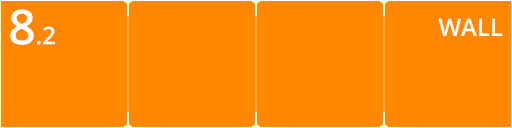
<style>
.page{position:relative;width:512px;height:128px;background:#ff8800}
.page>*{position:absolute;margin:0}
.t1{font:24px "OpenSans-Semibold";color:#ffffff}
.t2{font:48px "OpenSans-Semibold";color:#ffffff}
</style>
<div class="page">
<p class="t1" style="left:10px;top:9px;width:45px;height:36px"><span class="t2">8</span>.2</p>
<p class="t1" style="left:438px;top:18px;width:65px;height:18px">WALL</p>
</div>
